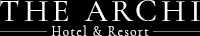
<style>
.page{position:relative;width:200px;height:36px;background:#000000}
.page>*{position:absolute;margin:0}
.t1{font:32.2px "CormorantGaramond-Medium";letter-spacing:0.12em;color:#ffffff}
.t2{font:12.9px "CormorantGaramond-Light";letter-spacing:0.12em;color:#ffffff}
</style>
<div class="page">
<p class="t1" style="left:0px;top:0px;width:200px;height:21px">THE ARCHI</p>
<p class="t2" style="left:51px;top:25px;width:98px;height:11px">Hotel &amp; Resort</p>
</div>
